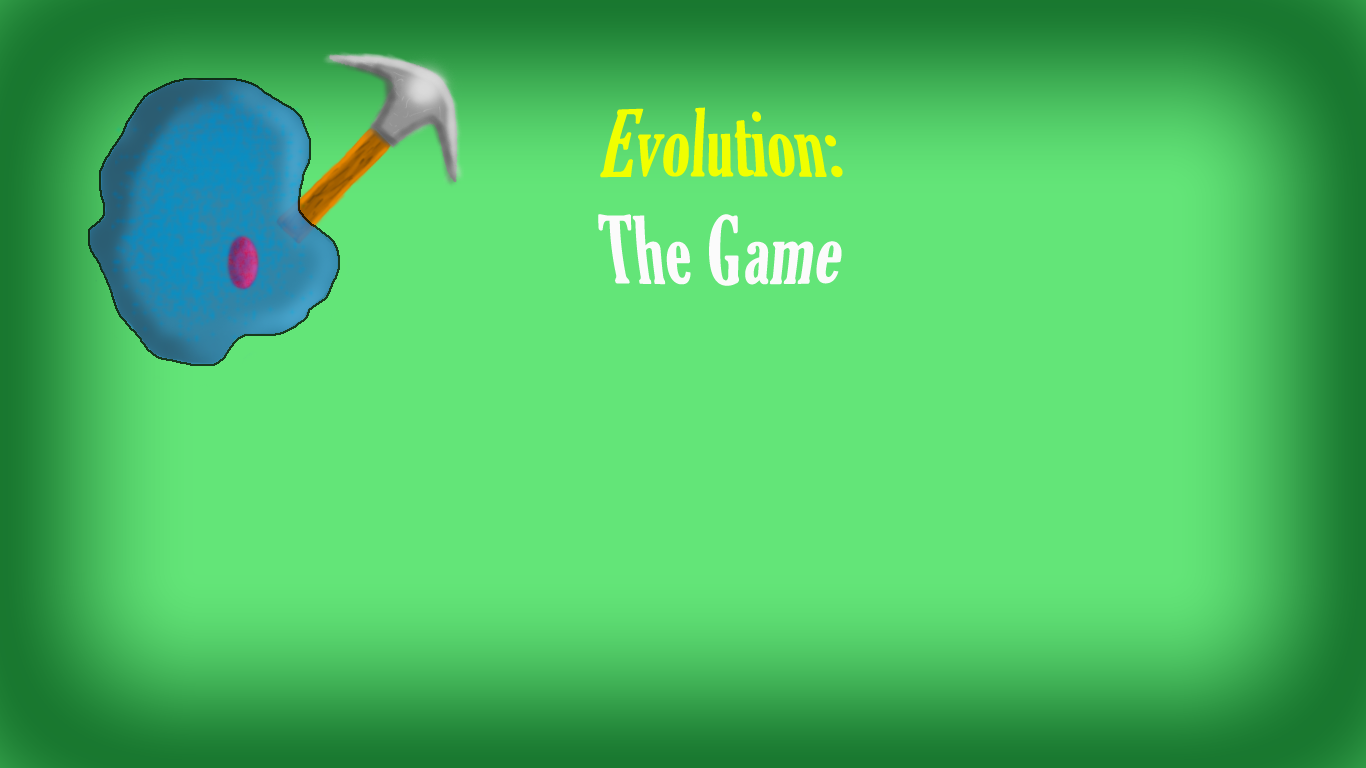
<style>
.page{position:relative;width:1366px;height:768px;background:#63e578}
.page>*{position:absolute;margin:0}
.t1{font:72px "GloucesterMT-ExtraCondensed";color:#f0ff00}
.t2{font:72px "GloucesterMT-ExtraCondensed";color:#fbfbfb}
</style>
<div class="page">
<p class="t1" style="left:598px;top:107px;width:245px;height:179px;text-align:center">Evolution:<br><span class="t2">The Game</span></p>
</div>
